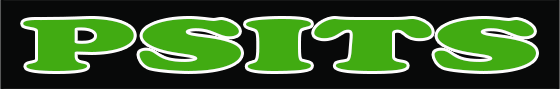
<style>
.page{position:relative;width:560px;height:89px;background:#080909}
.page>*{position:absolute;margin:0}
.t1{font:71.5px "CooperBlackStd";color:#41ab12;scale:2.23 1}
</style>
<div class="page">
<p class="t1" style="left:23px;top:19px;width:513px;height:52px">PSITS</p>
</div>
